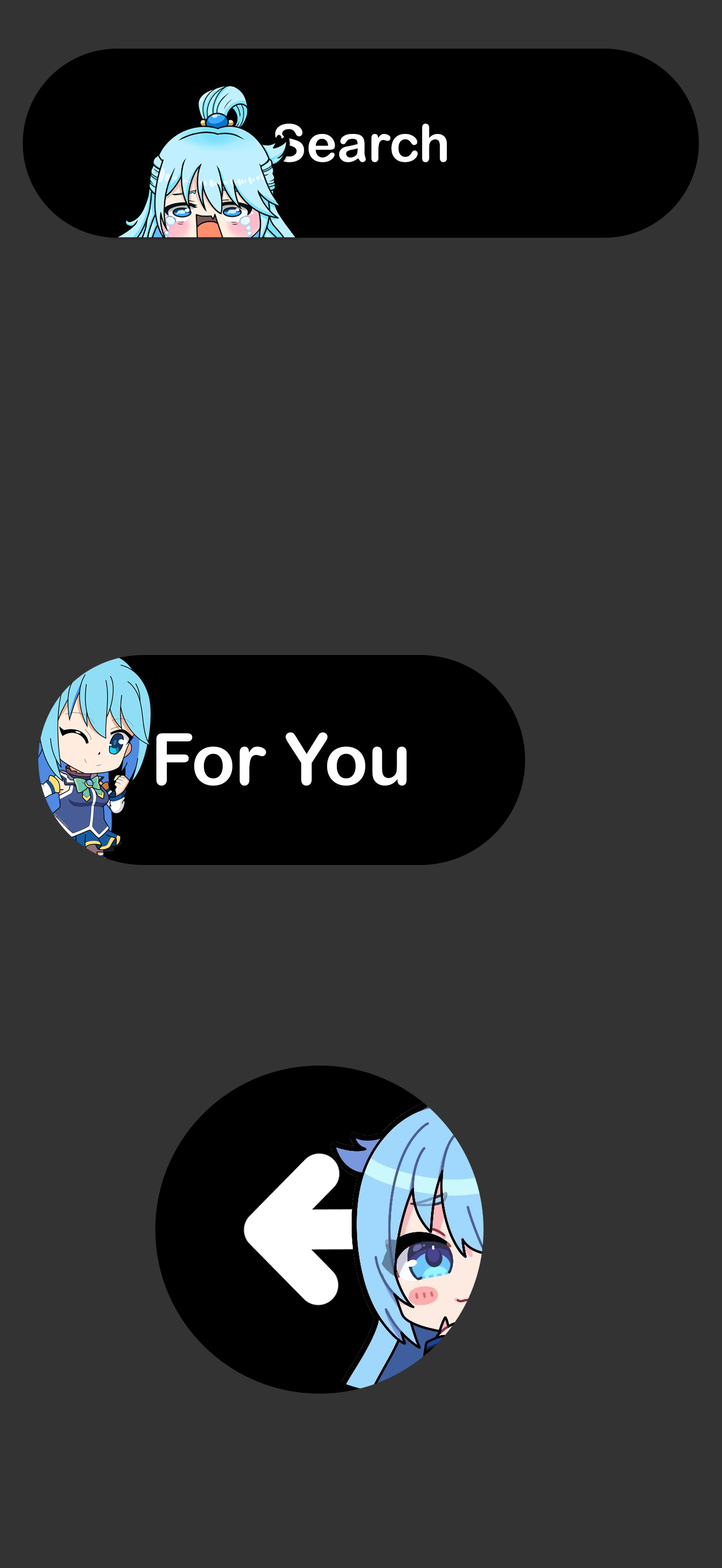
<style>
.page{position:relative;width:722px;height:1568px;background:#333333}
.page>*{position:absolute;margin:0}
.t1{font:51.8px "ArialRoundedMTBold";color:#ffffff}
.t2{font:71.7px "ArialRoundedMTBold";color:#ffffff}
</style>
<div class="page">
<p class="t1" style="left:273px;top:124px;width:174px;height:39px">Search</p>
<p class="t2" style="left:155px;top:732px;width:252px;height:54px">For You</p>
</div>
